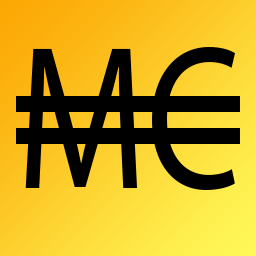
<style>
.page{position:relative;width:256px;height:256px;background:#000000}
.page>*{position:absolute;margin:0}
.t1{font:206.1px "MyriadPro-Regular";color:#000000;scale:0.79 1}
</style>
<div class="page">
<p class="t1" style="left:25px;top:47px;width:210px;height:143px">MC</p>
</div>
